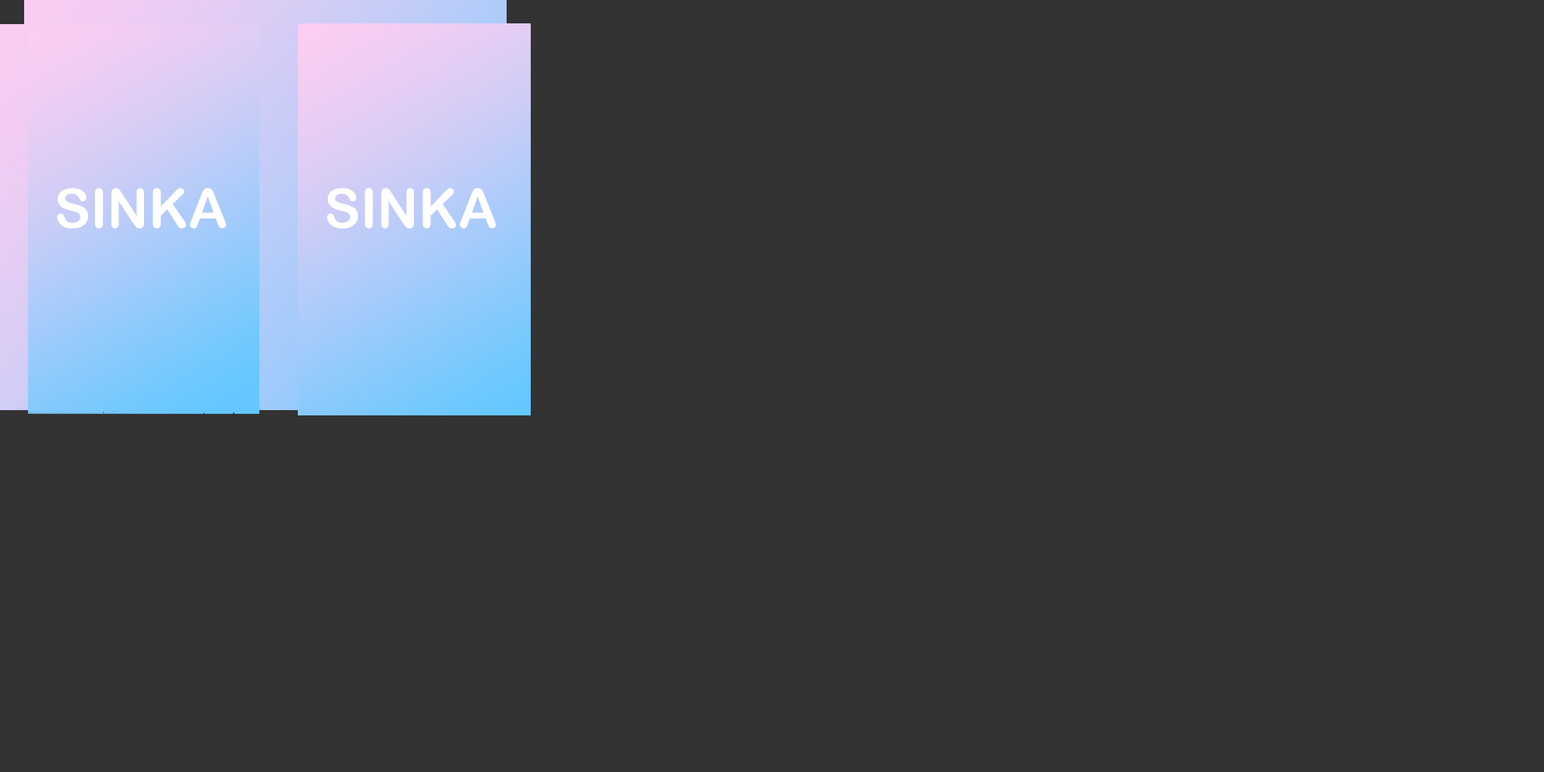
<style>
.page{position:relative;width:1544px;height:772px;background:#333333}
.page>*{position:absolute;margin:0}
.t1{font:54.3px "ArialRoundedMTBold";color:#ffffff}
</style>
<div class="page">
<p class="t1" style="left:57px;top:188px;width:169px;height:40px">SINKA</p>
<p class="t1" style="left:327px;top:188px;width:169px;height:40px">SINKA</p>
</div>
